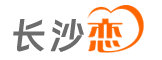
<style>
.page{position:relative;width:162px;height:60px;background:#ffffff}
.page>*{position:absolute;margin:0}
.t1{font:37.5px "DingTalk-JinBuTi";color:#6c6c6c;font-weight:bold}
</style>
<div class="page">
<p class="t1" style="left:13px;top:19px;width:71px;height:33px">长沙</p>
</div>
